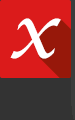
<style>
.page{position:relative;width:75px;height:120px;background:#db1b1b}
.page>*{position:absolute;margin:0}
.t1{font:72px "LucidaCalligraphy-Italic";color:#ffffff}
</style>
<div class="page">
<p class="t1" style="left:10px;top:18px;width:51px;height:41px">x</p>
</div>
